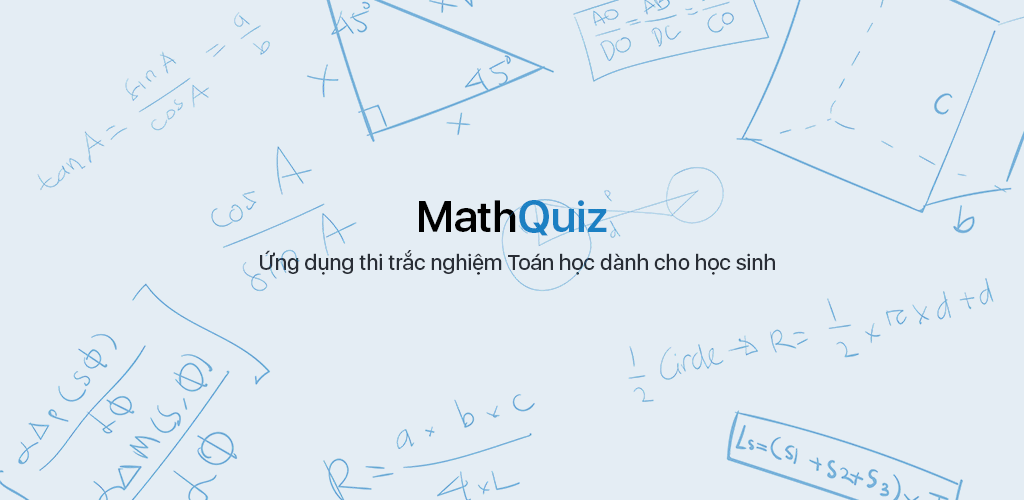
<style>
.page{position:relative;width:1024px;height:500px;background:#e4edf4}
.page>*{position:absolute;margin:0}
.t1{font:43.9px "SFUIDisplay-Semibold";color:#000000}
.t2{font:43.9px "SFUIDisplay-Semibold";color:#1c80c3}
.t3{font:21.6px "SFUIDisplay-Medium";color:#292e36}
</style>
<div class="page">
<p class="t1" style="left:419px;top:200px;width:188px;height:36px">Math<span class="t2">Quiz</span></p>
<p class="t3" style="left:260px;top:250px;width:515px;height:25px">Ứng dụng thi trắc nghiệm Toán học dành cho học sinh</p>
</div>
